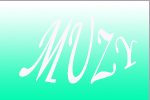
<style>
.page{position:relative;width:150px;height:100px}
.page>*{position:absolute;margin:0}
.t1{font:74.4px "MonotypeCorsiva";color:#fcf6fa;font-variant:small-caps;scale:0.71 1}
</style>
<div class="page">
<p class="t1" style="left:19px;top:14px;width:118px;height:70px">muzy</p>
</div>
